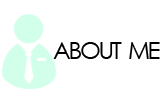
<style>
.page{position:relative;width:160px;height:101px;background:#ffffff}
.page>*{position:absolute;margin:0}
.t1{font:24px "CenturyGothic";letter-spacing:-0.1em;color:#000000}
</style>
<div class="page">
<p class="t1" style="left:53px;top:42px;width:107px;height:17px">ABOUT  ME</p>
</div>
